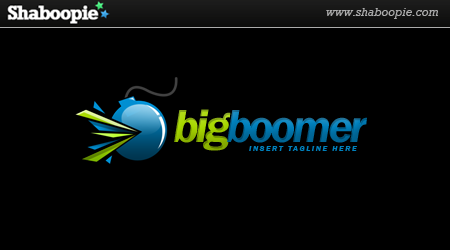
<style>
.page{position:relative;width:450px;height:250px;background:#000000}
.page>*{position:absolute;margin:0}
.t1{font:48px "FranklinGothic-DemiItalic";letter-spacing:-0.075em}
.t2{font:8px "FranklinGothic-DemiItalic";letter-spacing:0.2em;color:#0080bc}
</style>
<div class="page">
<p class="t1" style="left:174px;top:109px;width:193px;height:42px">bigboomer</p>
<p class="t2" style="left:249px;top:146px;width:108px;height:5px">INSERT TAGLINE HERE</p>
</div>
